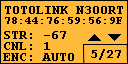
<style>
.page{position:relative;width:128px;height:64px;background:#ffba3a}
.page>*{position:absolute;margin:0}
.t1{font:12.5px "CourierNewPS-BoldMT";color:#000000}
.t2{font:11.2px "CourierNewPS-BoldMT";color:#000000}
</style>
<div class="page">
<p class="t1" style="left:5px;top:6px;width:118px;height:8px">TOTOLINK N300RT</p>
<p class="t2" style="left:5px;top:17px;width:117px;height:7px">78:44:76:59:56:9F</p>
<p class="t1" style="left:4px;top:31px;width:62px;height:8px">STR: -67</p>
<p class="t1" style="left:3px;top:53px;width:71px;height:8px">ENC: AUTO</p>
<p class="t1" style="left:4px;top:42px;width:46px;height:8px">CNL: 1</p>
<p class="t1" style="left:91px;top:49px;width:30px;height:11px">5/27</p>
</div>
